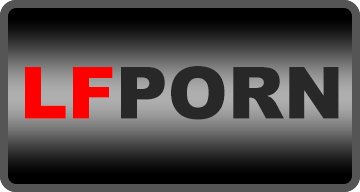
<style>
.page{position:relative;width:360px;height:192px}
.page>*{position:absolute;margin:0}
.t1{font:72px "Arial-Black";color:#282828}
.t2{font:72px "Arial-Black";color:#ff0000}
</style>
<div class="page">
<p class="t1" style="left:25px;top:66px;width:314px;height:54px"><span class="t2">LF</span>PORN</p>
</div>
